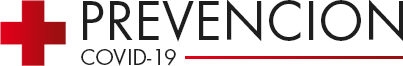
<style>
.page{position:relative;width:403px;height:66px;background:#ffffff}
.page>*{position:absolute;margin:0}
.t1{font:57.9px "FuturaTOT-Book";color:#1e1e1e}
.t2{font:23.8px "FuturaTOT-Book";color:#1e1e1e}
</style>
<div class="page">
<p class="t1" style="left:83px;top:0px;width:321px;height:42px">PREVENCION</p>
<p class="t2" style="left:81px;top:49px;width:95px;height:17px">COVID-19</p>
</div>
